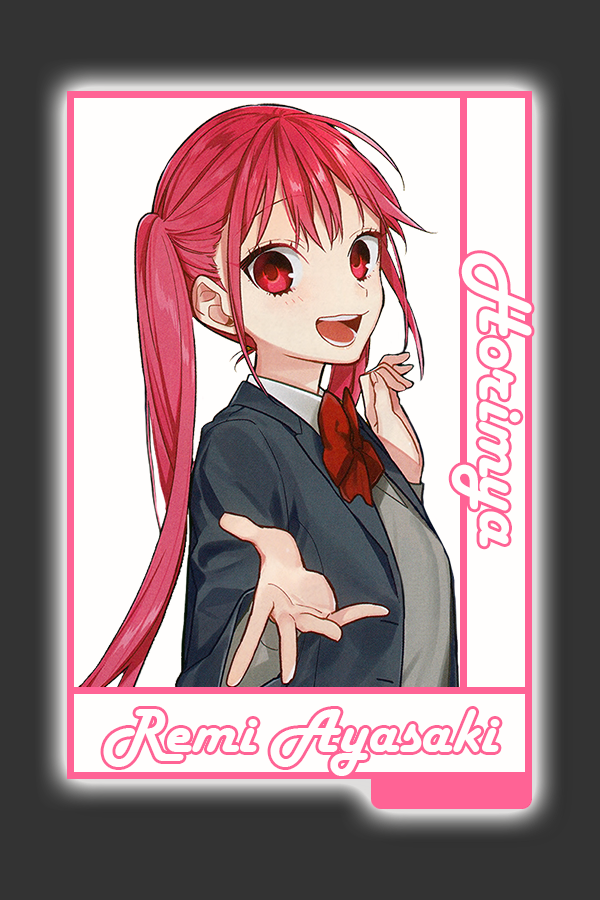
<style>
.page{position:relative;width:600px;height:900px;background:#fffefd}
.page>*{position:absolute;margin:0}
.t1{font:77.5px "HarlowSolid";color:#fffefd}
.t2{font:65.2px "HarlowSolid";color:#fffefd}
</style>
<div class="page">
<p class="t1" style="left:451px;top:253px;width:81px;height:294px;rotate:90deg">Horimya</p>
<p class="t2" style="left:103px;top:709px;width:397px;height:67px">Remi Ayasaki</p>
</div>
